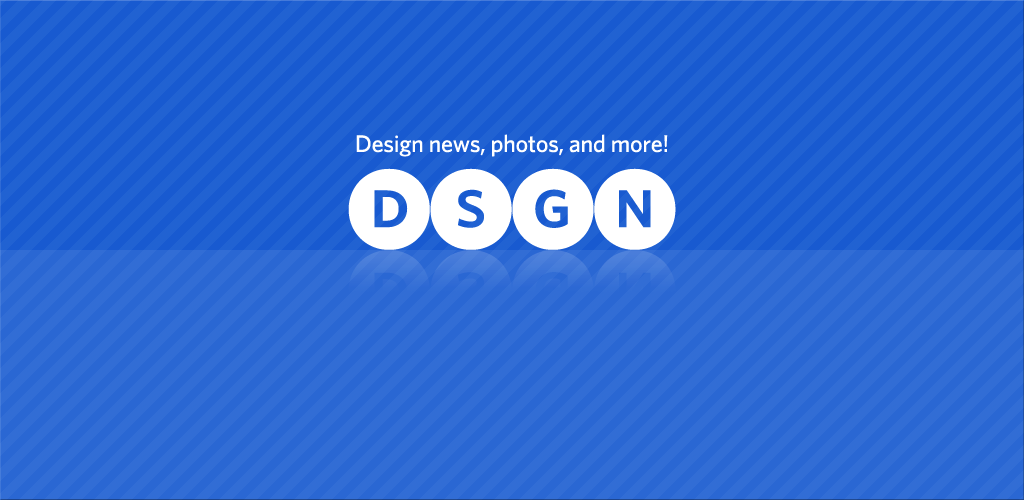
<style>
.page{position:relative;width:1024px;height:500px;background:#2a67d3}
.page>*{position:absolute;margin:0}
.t1{font:24px "Whitney-Medium";letter-spacing:-0.01em;color:#ffffff}
</style>
<div class="page">
<p class="t1" style="left:356px;top:134px;width:312px;height:23px">Design news, photos, and more!</p>
</div>
